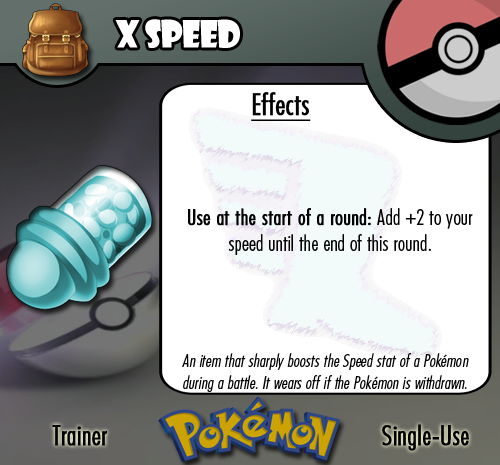
<style>
.page{position:relative;width:500px;height:465px;background:#ffffff}
.page>*{position:absolute;margin:0}
.t1{font:36.7px "ShowcardGothic-Reg";letter-spacing:-0.025em;color:#ffffff;scale:0.91 1}
.t2{font:22.2px "FuturaCondensedBQ-Light";color:#010101}
.t3{font:27.8px "FuturaCondensedBQ-Light";color:#010101;font-weight:bold}
.t4{font:30.6px "FuturaCondensedBQ-Light";color:#010101;font-weight:bold;text-decoration:underline}
.t5{font:22.2px "FuturaCondensedBQ-Light";color:#010101;font-weight:bold}
.t6{font:18.1px "FuturaCondensedBQ-Light";color:#010101;font-style:italic}
</style>
<div class="page">
<p class="t1" style="left:115px;top:19px;width:125px;height:29px">X Speed</p>
<p class="t2" style="left:188px;top:92px;width:285px;height:163px"><span class="t3">  </span><span class="t4">Effects<br><br><br><br><br><br><br></span><span class="t5">Use at the start of a round: </span>Add +2 to your speed until the end of this round.</p>
<p class="t6" style="left:182px;top:353px;width:287px;height:39px;text-align:center">An item that sharply boosts the Speed stat of a Pokémon during a battle. It wears off if the Pokémon is withdrawn.</p>
<p class="t3" style="left:52px;top:425px;width:55px;height:21px">Trainer</p>
<p class="t3" style="left:382px;top:424px;width:87px;height:27px">Single-Use</p>
</div>
